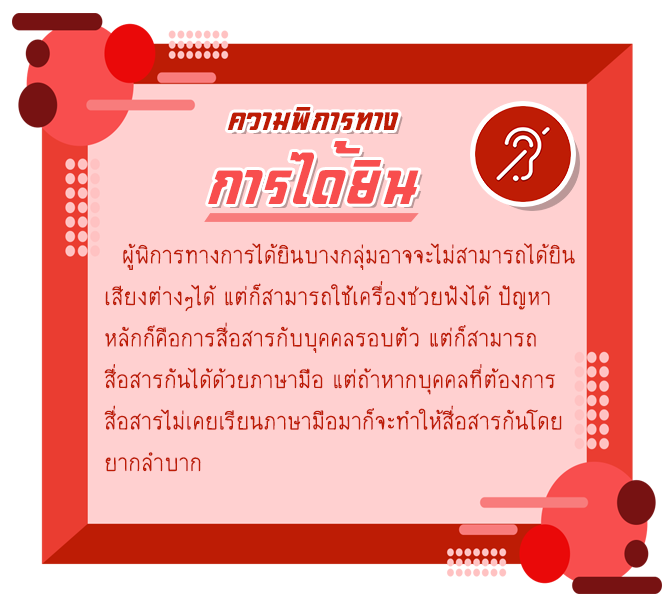
<style>
.page{position:relative;width:670px;height:614px;background:#ffd0d0}
.page>*{position:absolute;margin:0}
.t1{font:41px/74px "DSNWatTaNa";color:#bd1c05}
.t2{font:79px/74px "DSNWatTaNa";color:#f84e4e}
.t3{font:34.6px "2005_iannnnnHBO";color:#bd1c05}
.t4{font:28.5px "2005_iannnnnHBO";color:#bd1c05}
</style>
<div class="page">
<p class="t1" style="left:208px;top:107px;width:211px;height:97px;text-align:center">ความพิการทาง<br><span class="t2">การได้ยิน</span></p>
<p class="t3" style="left:104px;top:243px;width:471px;height:229px"><span class="t4"> </span>ผู้พิการทางการได้ยินบางกลุ่มอาจจะไม่สามารถได้ยิน<br>เสียงต่างๆได้ แต่ก็สามารถใช้เครื่องช่วยฟังได้ ปัญหา<br>หลักก็คือการสื่อสารกับบุคคลรอบตัว แต่ก็สามารถ<br>สื่อสารกันได้ด้วยภาษามือ แต่ถ้าหากบุคคลที่ต้องการ<br>สื่อสารไม่เคยเรียนภาษามือมาก็จะทำให้สื่อสารกันโดย<br>ยากลำบาก</p>
</div>
